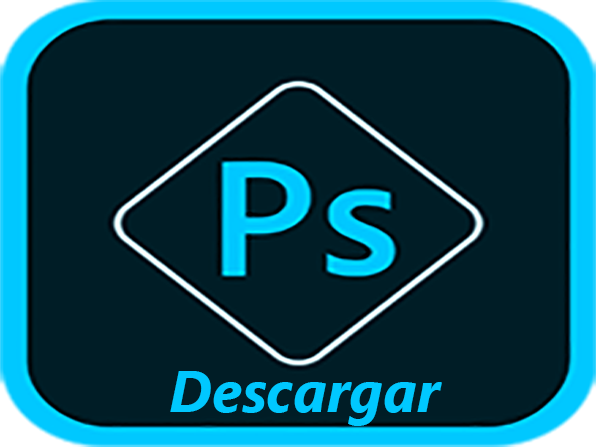
<style>
.page{position:relative;width:596px;height:447px;background:#001d26}
.page>*{position:absolute;margin:0}
.t1{font:57.6px "SegoeUI-BoldItalic";color:#00c8ff}
</style>
<div class="page">
<p class="t1" style="left:170px;top:371px;width:272px;height:55px">Descargar</p>
</div>
